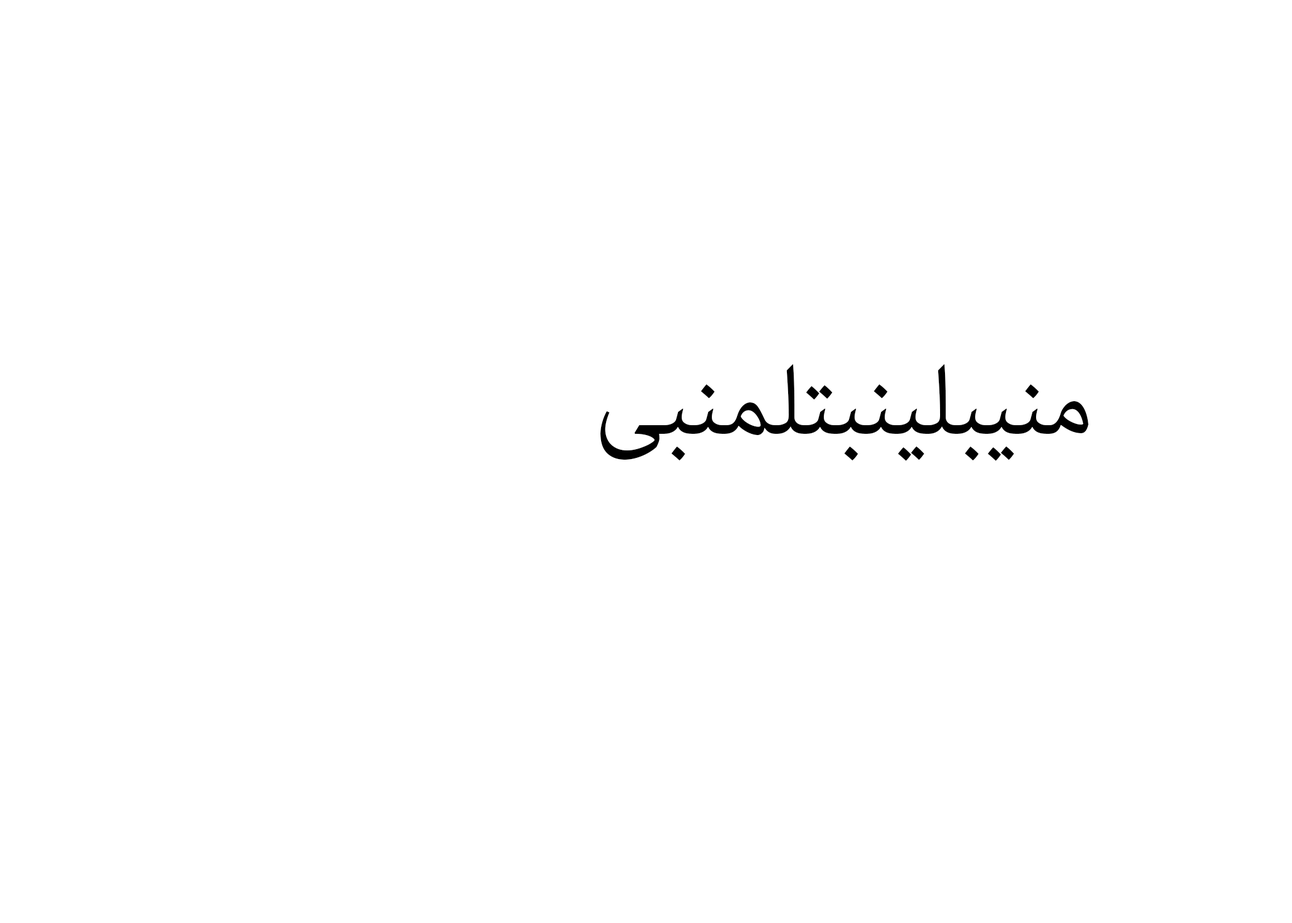
<style>
.page{position:relative;width:1292px;height:923px;background:#ffffff}
.page>*{position:absolute;margin:0}
.t1{font:138.4px "AdobeArabic-Regular";color:#000000}
</style>
<div class="page">
<p class="t1" style="left:600px;top:364px;width:488px;height:97px">منیبلینبتلمنبی</p>
</div>
